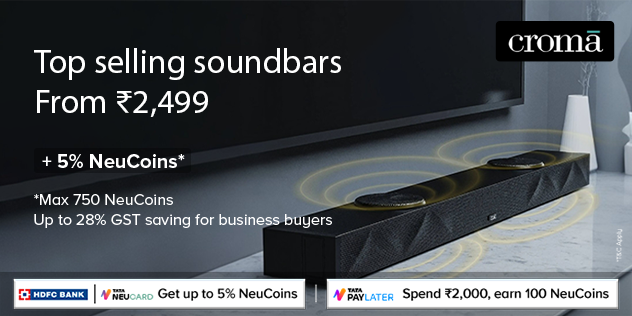
<style>
.page{position:relative;width:632px;height:316px}
.page>*{position:absolute;margin:0}
.t1{font:34px/40px "MyriadPro-Regular";color:#ffffff}
.t2{font:20px "ProximaNovaA-Bold";color:#ffffff}
.t3{font:16px "ProximaNovaA-Regular";color:#ffffff}
</style>
<div class="page">
<p class="t1" style="left:34px;top:48px;width:307px;height:69px">Top selling soundbars<br>From ₹2,499</p>
<p class="t2" style="left:42px;top:154px;width:143px;height:14px">+ 5% NeuCoins*</p>
<p class="t3" style="left:34px;top:194px;width:298px;height:34px">*Max 750 NeuCoins <br>Up to 28% GST saving for business buyers</p>
</div>
